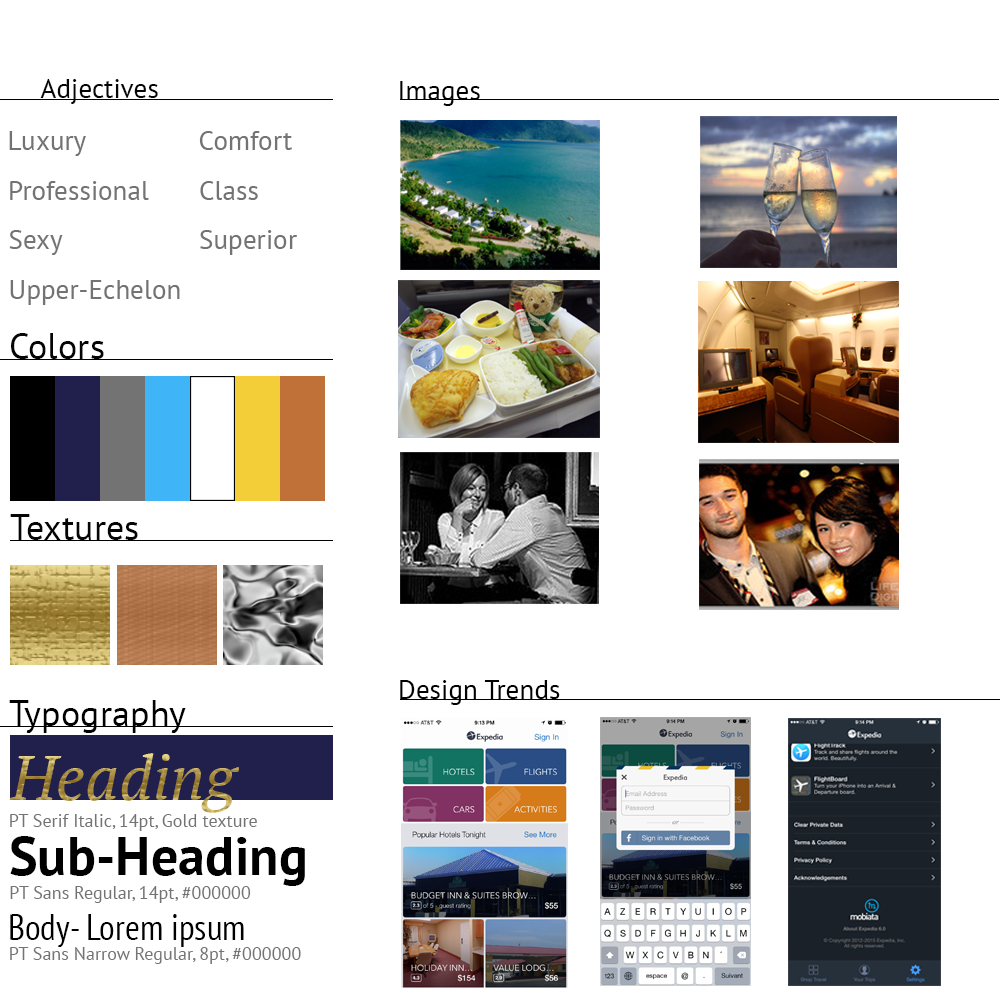
<style>
.page{position:relative;width:1000px;height:1000px;background:#ffffff}
.page>*{position:absolute;margin:0}
.t1{font:27.2px "PTSans-Regular";color:#050505}
.t2{font:27.2px "PTSans-Regular";color:#000000}
.t3{font:27.2px "PTSans-Regular";color:#737373}
.t4{font:36.2px "PTSans-Regular";color:#050505}
.t5{font:36.2px "PTSans-Regular";color:#000000}
.t6{font:18.1px "PTSans-Regular";color:#737373}
.t7{font:54.3px "PTSans-Bold";color:#000000}
.t8{font:36.2px "PTSans-Narrow";color:#000000}
</style>
<div class="page">
<p class="t1" style="left:40px;top:79px;width:118px;height:25px">Adjectives</p>
<p class="t2" style="left:400px;top:81px;width:80px;height:25px">Images</p>
<p class="t3" style="left:9px;top:131px;width:77px;height:25px">Luxury</p>
<p class="t3" style="left:199px;top:131px;width:93px;height:19px">Comfort</p>
<p class="t3" style="left:10px;top:181px;width:139px;height:19px">Professional</p>
<p class="t3" style="left:200px;top:181px;width:58px;height:19px">Class</p>
<p class="t3" style="left:9px;top:230px;width:54px;height:25px">Sexy</p>
<p class="t3" style="left:200px;top:230px;width:97px;height:25px">Superior</p>
<p class="t3" style="left:10px;top:280px;width:170px;height:25px">Upper-Echelon</p>
<p class="t4" style="left:11px;top:333px;width:93px;height:26px">Colors</p>
<p class="t4" style="left:10px;top:514px;width:128px;height:26px">Textures</p>
<p class="t2" style="left:400px;top:680px;width:160px;height:25px">Design Trends</p>
<p class="t5" style="left:9px;top:700px;width:177px;height:33px">Typography</p>
<p class="t6" style="left:10px;top:814px;width:247px;height:17px">PT Serif Italic, 14pt, Gold texture</p>
<p class="t7" style="left:10px;top:836px;width:295px;height:50px">Sub-Heading</p>
<p class="t6" style="left:10px;top:886px;width:241px;height:17px">PT Sans Regular, 14pt, #000000</p>
<p class="t8" style="left:10px;top:914px;width:234px;height:33px">Body- Lorem ipsum</p>
<p class="t6" style="left:10px;top:947px;width:291px;height:17px">PT Sans Narrow Regular, 8pt, #000000</p>
</div>
